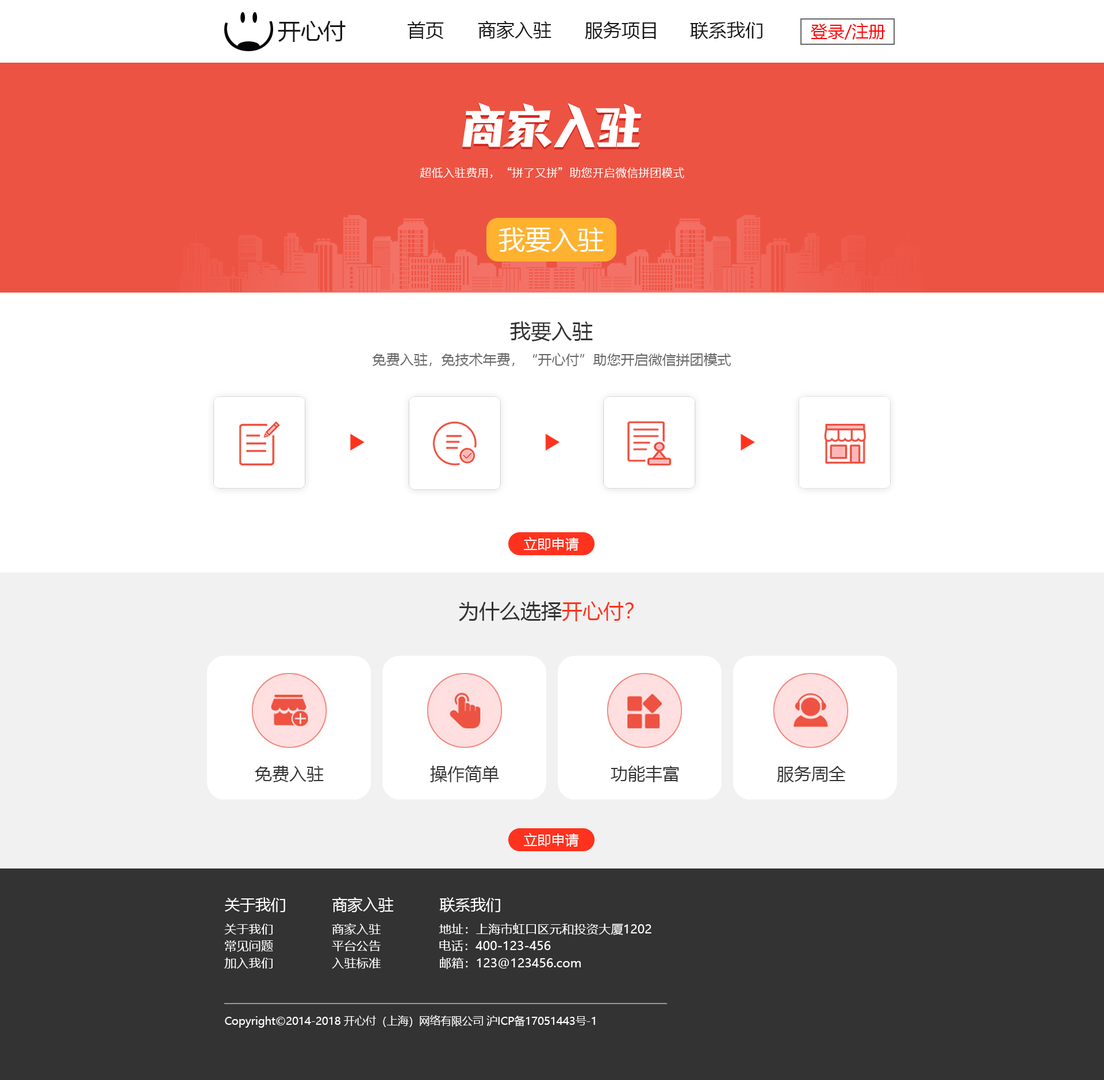
<style>
.page{position:relative;width:1104px;height:1080px;background:#ffffff}
.page>*{position:absolute;margin:0}
.t1{font:22.6px "MicrosoftYaHei";color:#171717}
.t2{font:18.4px "MicrosoftYaHei";color:#171717}
.t3{font:16.9px "MicrosoftYaHei";color:#ff0000}
.t4{font:26.4px "MicrosoftYaHei";color:#ffffff}
.t5{font:20.7px "MicrosoftYaHei";color:#333333}
.t6{font:13.8px "MicrosoftYaHei";color:#666666}
.t7{font:13.8px "MicrosoftYaHei";color:#ffffff}
.t8{font:20.7px "MicrosoftYaHei";color:#ff321d}
.t9{font:17.2px "MicrosoftYaHei";color:#333333}
.t10{font:15.3px "MicrosoftYaHei";color:#ffffff}
.t11{font:12.3px "MicrosoftYaHei";color:#ffffff}
.t12{font:10.7px "MicrosoftYaHei";color:#ffffff}
</style>
<div class="page">
<p class="t1" style="left:278px;top:21px;width:68px;height:21px">开心付</p>
<p class="t2" style="left:408px;top:21px;width:36px;height:18px">首页</p>
<p class="t2" style="left:478px;top:21px;width:73px;height:18px">商家入驻</p>
<p class="t2" style="left:585px;top:21px;width:71px;height:18px">服务项目</p>
<p class="t2" style="left:690px;top:21px;width:72px;height:18px">联系我们</p>
<p class="t3" style="left:811px;top:23px;width:74px;height:17px">登录/注册</p>
<p class="t4" style="left:498px;top:227px;width:106px;height:25px">我要入驻</p>
<p class="t5" style="left:510px;top:321px;width:83px;height:20px">我要入驻</p>
<p class="t6" style="left:372px;top:353px;width:359px;height:13px">免费入驻，免技术年费，“开心付”助您开启微信拼团模式</p>
<p class="t7" style="left:524px;top:537px;width:55px;height:14px">立即申请</p>
<p class="t5" style="left:459px;top:601px;width:175px;height:20px">为什么选择<span class="t8">开心付？</span></p>
<p class="t9" style="left:255px;top:766px;width:69px;height:16px">免费入驻</p>
<p class="t9" style="left:430px;top:766px;width:69px;height:16px">操作简单</p>
<p class="t9" style="left:611px;top:766px;width:68px;height:16px">功能丰富</p>
<p class="t9" style="left:777px;top:766px;width:69px;height:16px">服务周全</p>
<p class="t7" style="left:524px;top:833px;width:55px;height:14px">立即申请</p>
<p class="t10" style="left:225px;top:897px;width:60px;height:15px">关于我们</p>
<p class="t10" style="left:332px;top:897px;width:61px;height:15px">商家入驻</p>
<p class="t10" style="left:439px;top:897px;width:61px;height:15px">联系我们</p>
<p class="t11" style="left:224px;top:924px;width:49px;height:11px">关于我们</p>
<p class="t11" style="left:332px;top:923px;width:49px;height:12px">商家入驻</p>
<p class="t11" style="left:439px;top:923px;width:212px;height:12px">地址：上海市虹口区元和投资大厦1202</p>
<p class="t11" style="left:225px;top:941px;width:48px;height:11px">常见问题</p>
<p class="t11" style="left:332px;top:941px;width:49px;height:10px">平台公告</p>
<p class="t11" style="left:439px;top:940px;width:112px;height:11px">电话：400-123-456</p>
<p class="t11" style="left:224px;top:958px;width:49px;height:11px">加入我们</p>
<p class="t11" style="left:332px;top:958px;width:49px;height:11px">入驻标准</p>
<p class="t11" style="left:440px;top:957px;width:141px;height:12px">邮箱：123@123456.com</p>
<p class="t12" style="left:225px;top:1015px;width:370px;height:13px">Copyright©2014-2018 开心付（上海）网络有限公司 沪ICP备17051443号-1</p>
</div>
